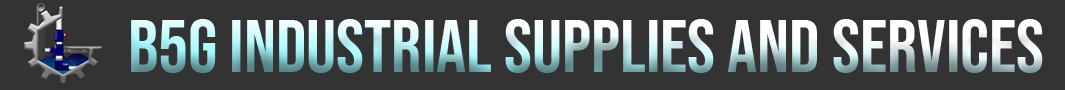
<style>
.page{position:relative;width:1065px;height:90px;background:#333333}
.page>*{position:absolute;margin:0}
.t1{font:75px "BebasNeue-Regular"}
</style>
<div class="page">
<p class="t1" style="left:131px;top:19px;width:912px;height:54px">b5g industrial supplies and services</p>
</div>
